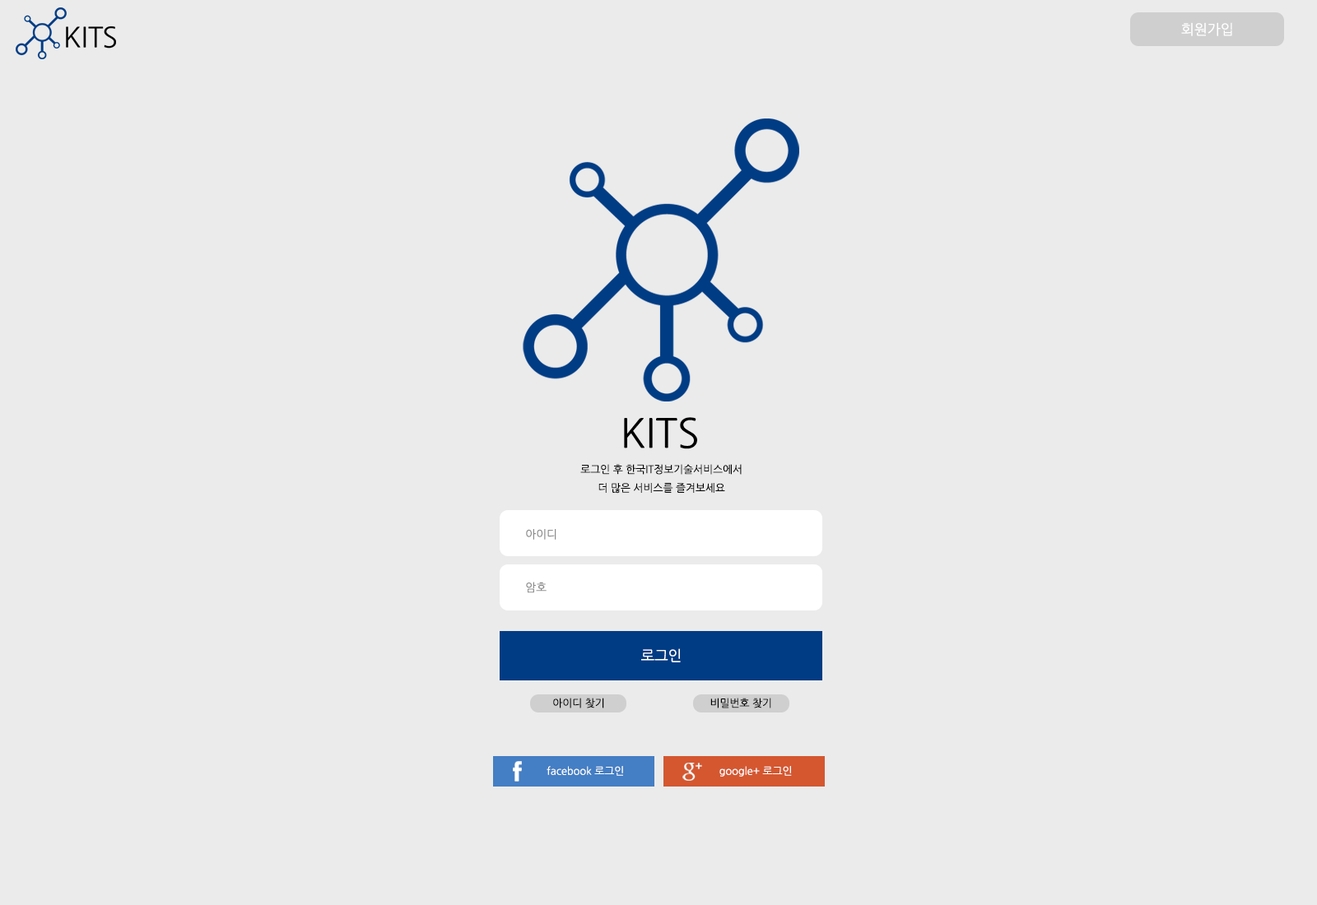
<style>
.page{position:relative;width:1317px;height:905px;background:#ebebeb}
.page>*{position:absolute;margin:0}
.t1{font:14px "NanumGothic";color:#ffffff}
.t2{font:40.3px "NanumGothic";color:#000000}
.t3{font:10.5px/18.5px "NanumGothic";color:#000000}
.t4{font:11.3px "NanumGothic";color:#8d8d8d}
.t5{font:14.5px "NanumGothic";color:#ffffff}
.t6{font:10.5px "NanumGothic";color:#000000}
.t7{font:10.5px "NanumGothic";color:#ffffff}
</style>
<div class="page">
<p class="t1" style="left:1181px;top:22px;width:51px;height:14px">회원가입</p>
<p class="t2" style="left:624px;top:417px;width:73px;height:32px">KITS</p>
<p class="t3" style="left:580px;top:464px;width:162px;height:30px;text-align:center">로그인 후 한국IT정보기술서비스에서<br>더 많은 서비스를 즐겨보세요</p>
<p class="t4" style="left:526px;top:529px;width:30px;height:11px">아이디</p>
<p class="t4" style="left:526px;top:582px;width:21px;height:11px">암호</p>
<p class="t5" style="left:641px;top:649px;width:40px;height:14px">로그인</p>
<p class="t6" style="left:553px;top:698px;width:51px;height:11px">아이디 찾기</p>
<p class="t6" style="left:710px;top:698px;width:61px;height:11px">비밀번호 찾기</p>
<p class="t7" style="left:547px;top:766px;width:76px;height:10px">facebook 로그인</p>
<p class="t7" style="left:719px;top:766px;width:73px;height:11px">google+ 로그인</p>
</div>
